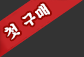
<style>
.page{position:relative;width:84px;height:57px;background:#333333}
.page>*{position:absolute;margin:0}
.t1{font:14.8px "SDKukdetopokki-bBd";letter-spacing:0.12em;color:#feffff}
</style>
<div class="page">
<p class="t1" style="left:4px;top:3px;width:46px;height:37px;rotate:-35deg">첫 구매</p>
</div>
